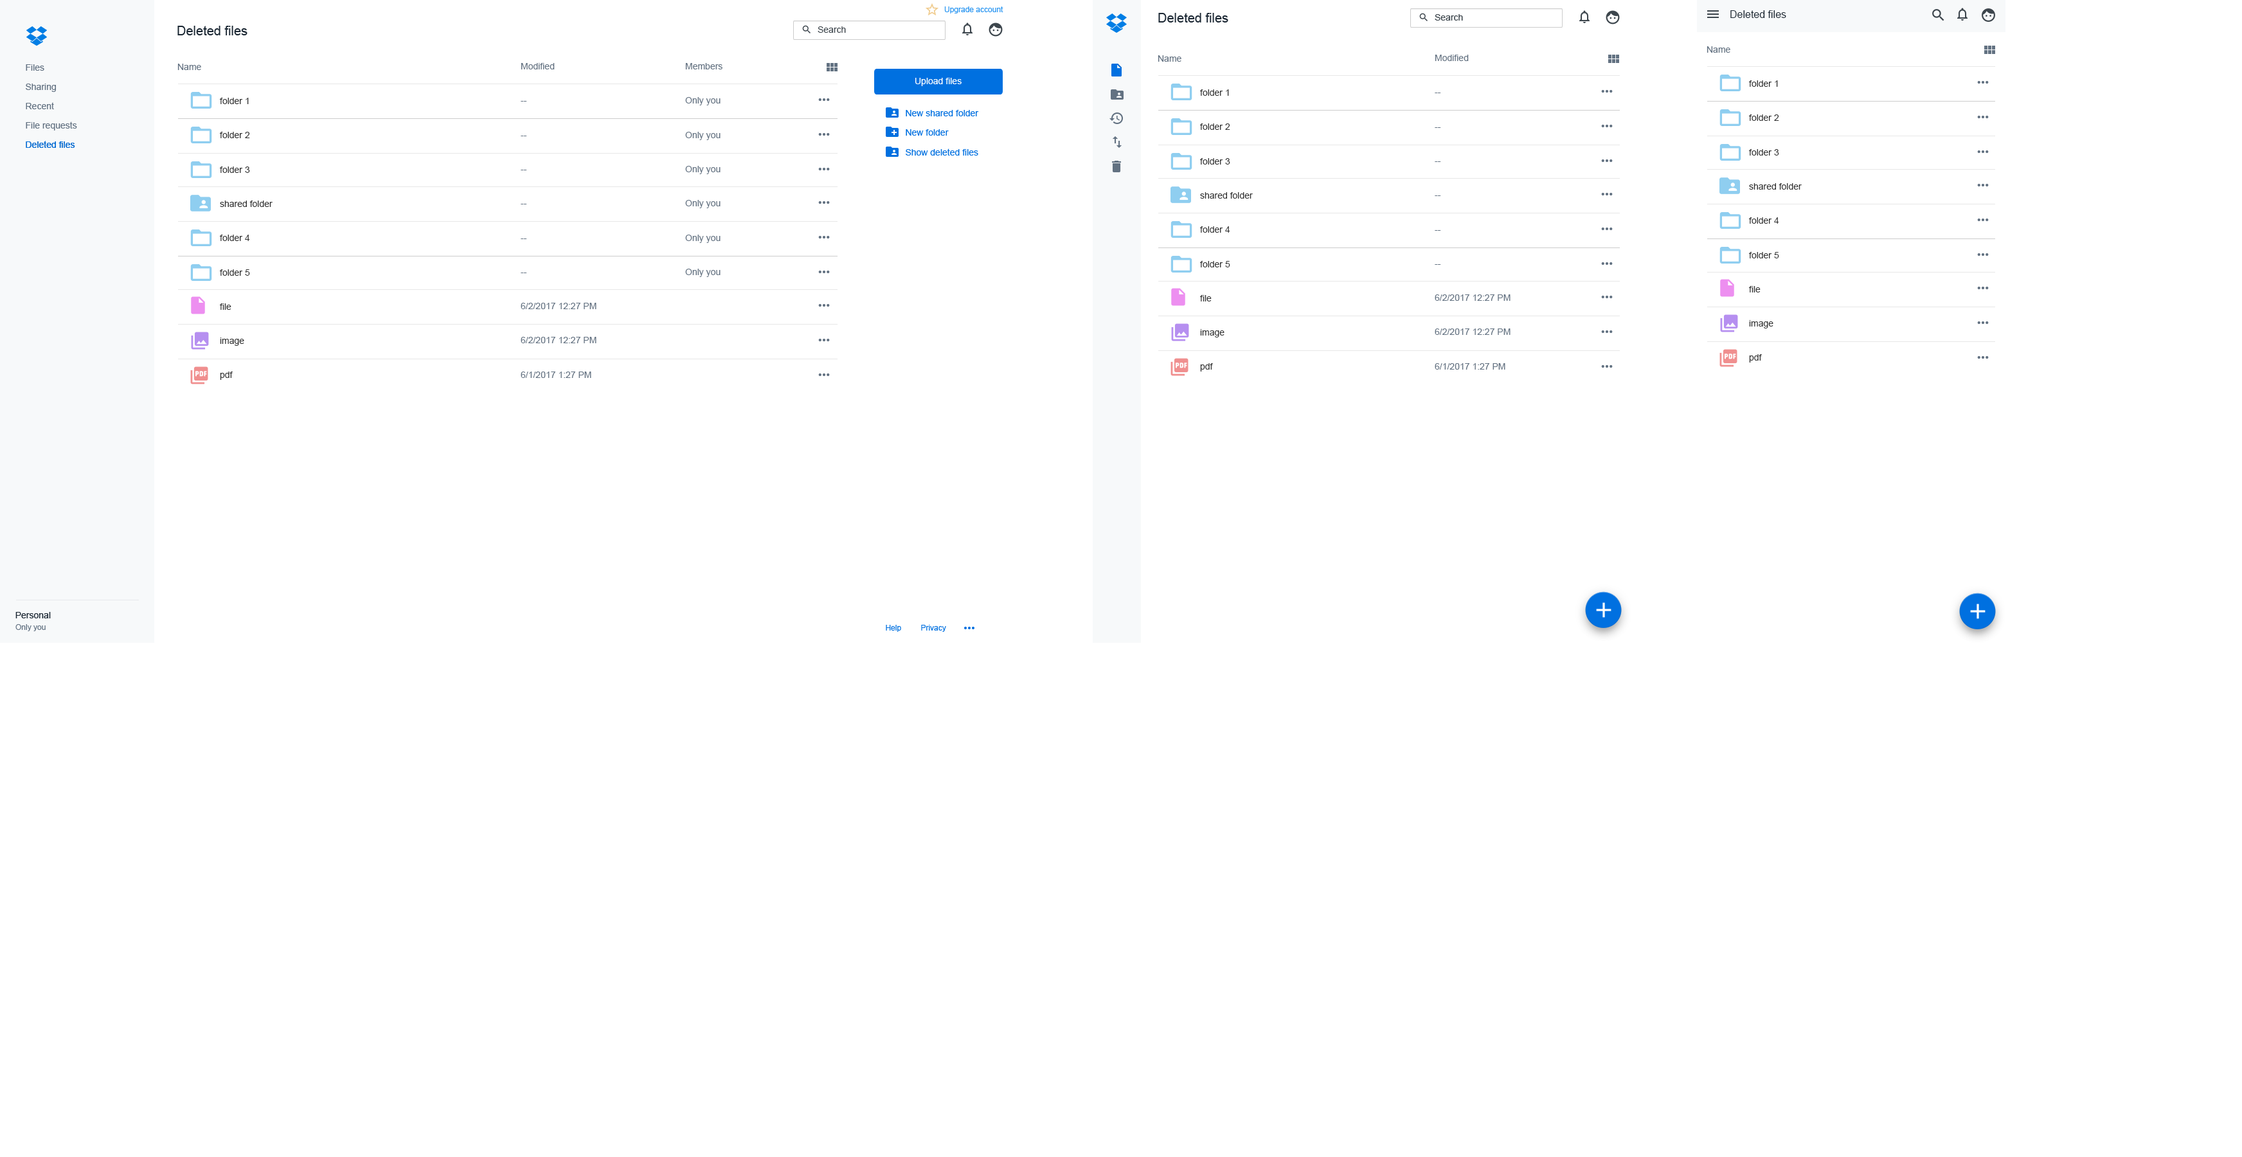
<style>
.page{position:relative;width:2242px;height:1157px;background:#ffffff}
.page>*{position:absolute;margin:0}
.t1{font:10.3px "ArialMT";color:#1b2733}
.t2{font:9px "ArialMT";color:#637282}
.t3{font:9px/34.3px "ArialMT";color:#637282}
.t4{font:9px/34.7px "ArialMT";color:#637282}
.t5{font:9px/34.3px "ArialMT";color:#333333}
</style>
<div class="page">
<p class="t1" style="left:1731px;top:10px;width:56px;height:8px">Deleted files</p>
<p class="t2" style="left:1707px;top:46px;width:24px;height:7px">Name</p>
<p class="t2" style="left:177px;top:64px;width:24px;height:6px">Name</p>
<p class="t3" style="left:521px;top:63px;width:76px;height:315px"><span class="t4">Modified<br></span>--<br>--<br>--<br>--<br>--<br>--<br>6/2/2017 12:27 PM<br>6/2/2017 12:27 PM<br>6/1/2017 1:27 PM</p>
<p class="t3" style="left:685px;top:63px;width:38px;height:214px"><span class="t4">Members<br></span>Only you<br>Only you<br>Only you<br>Only you<br>Only you<br>Only you</p>
<p class="t2" style="left:1158px;top:55px;width:24px;height:7px">Name</p>
<p class="t3" style="left:1435px;top:55px;width:76px;height:315px"><span class="t4">Modified<br></span>--<br>--<br>--<br>--<br>--<br>--<br>6/2/2017 12:27 PM<br>6/2/2017 12:27 PM<br>6/1/2017 1:27 PM</p>
<p class="t5" style="left:1200px;top:89px;width:53px;height:283px">folder 1<br>folder 2<br>folder 3<br>shared folder<br>folder 4<br>folder 5<br>file<br>image<br>pdf</p>
<p class="t5" style="left:1749px;top:80px;width:53px;height:283px">folder 1<br>folder 2<br>folder 3<br>shared folder<br>folder 4<br>folder 5<br>file<br>image<br>pdf</p>
<p class="t5" style="left:220px;top:98px;width:53px;height:282px">folder 1<br>folder 2<br>folder 3<br>shared folder<br>folder 4<br>folder 5<br>file<br>image<br>pdf</p>
</div>
